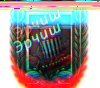
<style>
.page{position:relative;width:100px;height:88px}
.page>*{position:absolute;margin:0}
.t1{font:16px "MyriadPro-It";letter-spacing:0.075em}
</style>
<div class="page">
<p class="t1" style="left:13px;top:8px;width:48px;height:30px;rotate:-28deg">Эрчиш</p>
</div>
